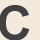
<style>
.page{position:relative;width:40px;height:40px;background:#f3e9dc}
.page>*{position:absolute;margin:0}
.t1{font:48px "Arial-BoldMT";color:#414141}
</style>
<div class="page">
<p class="t1" style="left:0px;top:5px;width:30px;height:36px">C</p>
</div>
